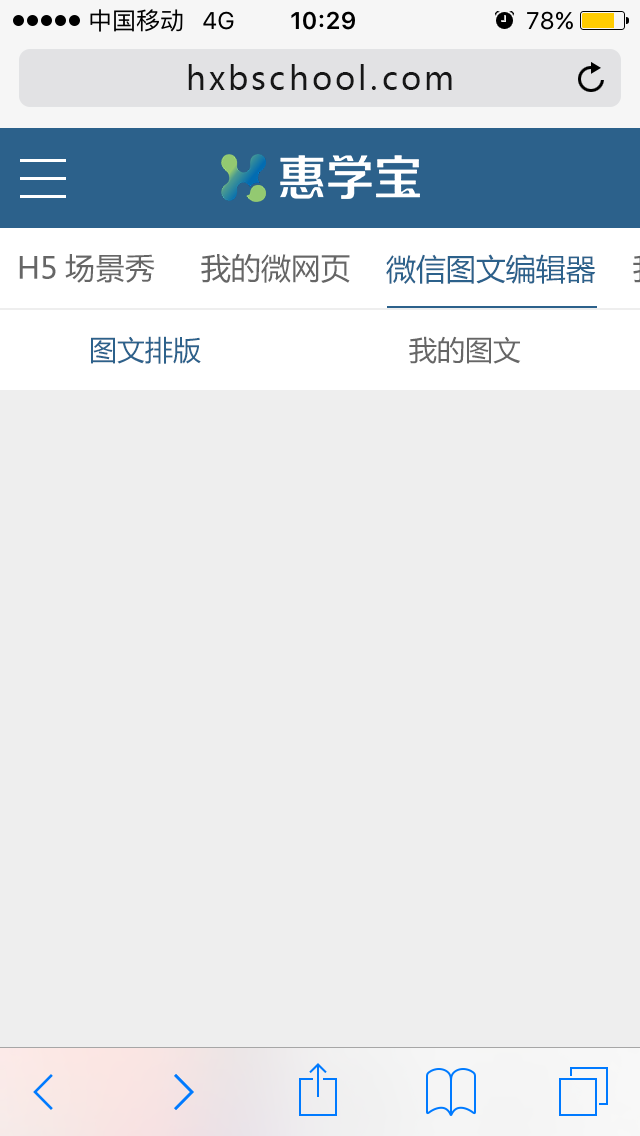
<style>
.page{position:relative;width:640px;height:1136px;background:#eeeeee}
.page>*{position:absolute;margin:0}
.t1{font:32px "MicrosoftYaHei";letter-spacing:0.1em;color:#171717}
.t2{font:30px "MicrosoftYaHei";color:#666666}
.t3{font:30px "MicrosoftYaHei";color:#2c618b}
.t4{font:28px "MicrosoftYaHei";color:#2c618b}
.t5{font:28px "MicrosoftYaHei";color:#666666}
</style>
<div class="page">
<p class="t1" style="left:188px;top:64px;width:264px;height:26px">hxbschool.com</p>
<p class="t2" style="left:19px;top:254px;width:136px;height:29px">H5场景秀</p>
<p class="t2" style="left:201px;top:253px;width:149px;height:30px">我的微网页</p>
<p class="t3" style="left:386px;top:254px;width:210px;height:30px">微信图文编辑器</p>
<p class="t4" style="left:91px;top:336px;width:110px;height:28px">图文排版</p>
<p class="t5" style="left:409px;top:336px;width:112px;height:28px">我的图文</p>
</div>
